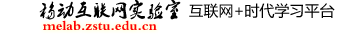
<style>
.page{position:relative;width:340px;height:36px;background:#ffffff}
.page>*{position:absolute;margin:0}
.t1{font:15px "MicrosoftYaHei";color:#000000}
.t2{font:18px "2.0-";color:#000000}
.t3{font:14px "2.0-";color:#ff0000}
</style>
<div class="page">
<p class="t1" style="left:39px;top:0px;width:296px;height:20px"><span class="t2">移动互联网实验室 </span>互联网+时代学习平台</p>
<p class="t3" style="left:43px;top:20px;width:114px;height:10px">melab.zstu.edu.cn</p>
</div>
